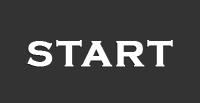
<style>
.page{position:relative;width:200px;height:103px;background:#333333}
.page>*{position:absolute;margin:0}
.t1{font:37px "CopperplateGothic-Bold";letter-spacing:0.05em;color:#ffffff;font-weight:bold}
</style>
<div class="page">
<p class="t1" style="left:27px;top:40px;width:146px;height:27px">START</p>
</div>
